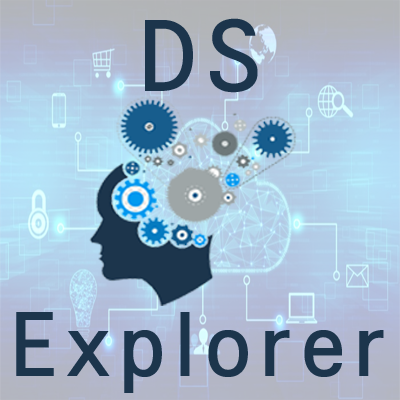
<style>
.page{position:relative;width:400px;height:400px}
.page>*{position:absolute;margin:0}
.t1{font:100px "LGDisplay-Regular";letter-spacing:0.1em;color:#1c354c}
.t2{font:90px "LGDisplay-Regular";letter-spacing:0.1em;color:#1c354c}
</style>
<div class="page">
<p class="t1" style="left:145px;top:18px;width:113px;height:75px">DS</p>
<p class="t2" style="left:16px;top:312px;width:368px;height:81px">Explorer</p>
</div>
